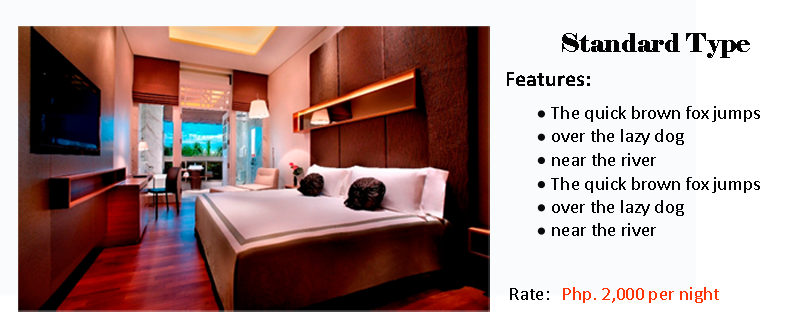
<style>
.page{position:relative;width:800px;height:333px;background:#fafbfc}
.page>*{position:absolute;margin:0}
.t1{font:25.7px "Elephant-Regular";color:#050505}
.t2{font:22.5px "Calibri-Bold";color:#050505}
.t3{font:19.3px "Calibri";color:#050505}
.t4{font:19.3px "Calibri";color:#ff3304}
</style>
<div class="page">
<p class="t1" style="left:562px;top:33px;width:188px;height:25px">Standard Type</p>
<p class="t2" style="left:507px;top:72px;width:83px;height:14px">Features:</p>
<p class="t3" style="left:551px;top:106px;width:209px;height:16px">The quick brown fox jumps</p>
<p class="t3" style="left:552px;top:129px;width:132px;height:16px">over the lazy dog</p>
<p class="t3" style="left:552px;top:153px;width:104px;height:13px">near the river</p>
<p class="t3" style="left:551px;top:177px;width:209px;height:16px">The quick brown fox jumps</p>
<p class="t3" style="left:552px;top:200px;width:132px;height:16px">over the lazy dog</p>
<p class="t3" style="left:552px;top:223px;width:104px;height:13px">near the river</p>
<p class="t3" style="left:510px;top:288px;width:39px;height:12px">Rate:</p>
<p class="t4" style="left:563px;top:287px;width:156px;height:16px">Php. 2,000 per night</p>
</div>
